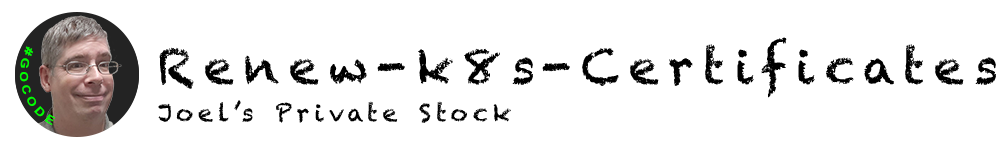
<style>
.page{position:relative;width:1000px;height:150px;background:#ffffff}
.page>*{position:absolute;margin:0}
.t1{font:48px "Chalkduster";letter-spacing:0.2em;color:#000000}
.t2{font:11.2px "Arial-BoldMT";letter-spacing:0.2em;color:#00ff00}
.t3{font:24px "Chalkduster";letter-spacing:0.2em;color:#000000}
</style>
<div class="page">
<p class="t1" style="left:159px;top:37px;width:837px;height:61px">Renew-k8s-Certificates</p>
<p class="t2" style="left:19px;top:46px;width:37px;height:80px;rotate:72deg">#GOCODE</p>
<p class="t3" style="left:158px;top:100px;width:353px;height:23px">Joel’s Private Stock</p>
</div>
